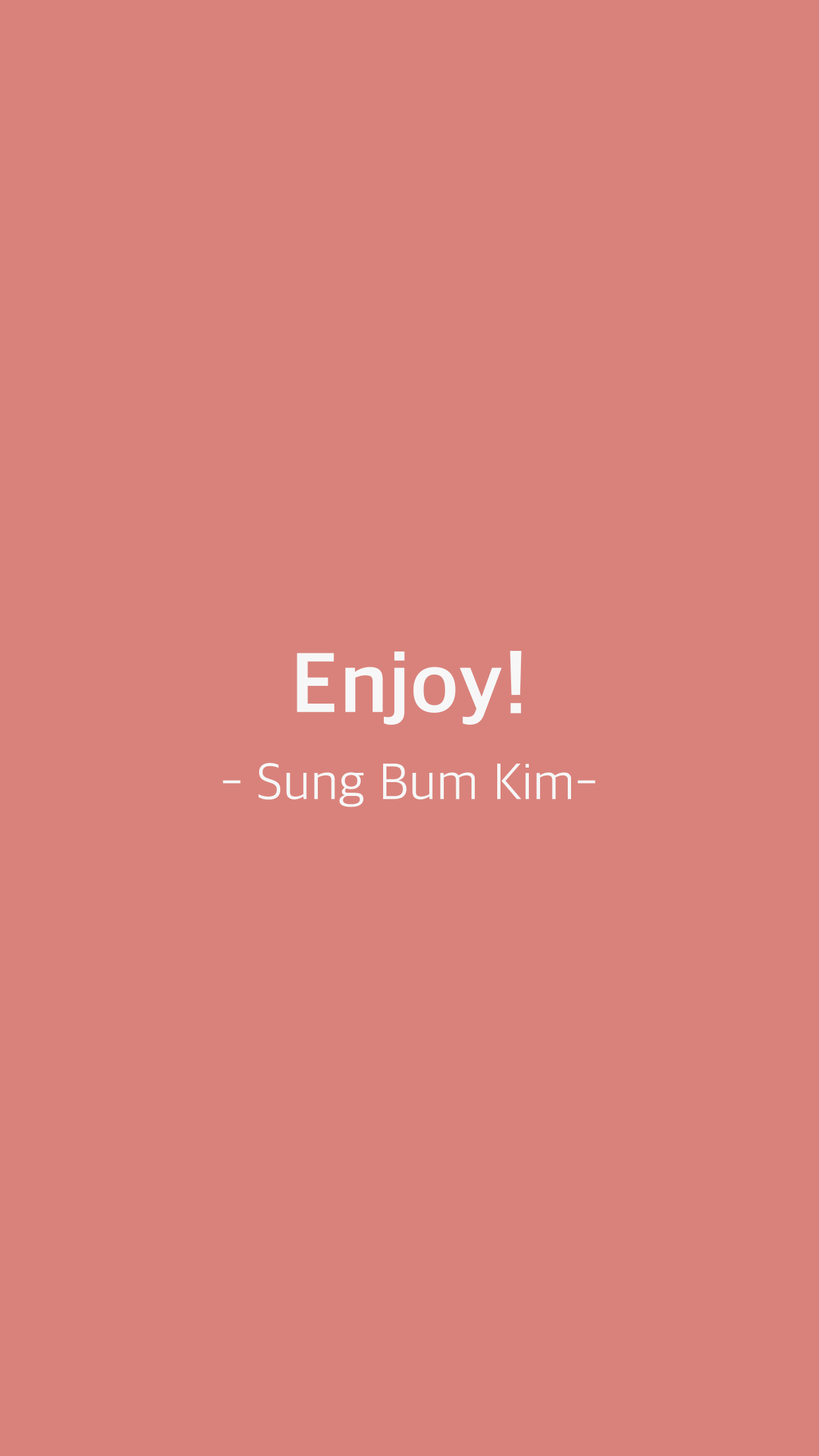
<style>
.page{position:relative;width:819px;height:1456px;background:#d9827b}
.page>*{position:absolute;margin:0}
.t1{font:52.8px/85.7px "AppleSDGothicNeo-Light";color:#f7f7f7}
.t2{font:85.7px/85.7px "AppleSDGothicNeo-Bold";color:#f7f7f7}
</style>
<div class="page">
<p class="t1" style="left:223px;top:651px;width:372px;height:156px;text-align:center"><span class="t2">Enjoy!<br></span>- Sung Bum Kim-</p>
</div>
